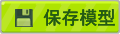
<style>
.page{position:relative;width:120px;height:34px;background:#aee301}
.page>*{position:absolute;margin:0}
.t1{font:18px "SimHei";color:#235b13}
</style>
<div class="page">
<p class="t1" style="left:43px;top:9px;width:72px;height:17px">保存模型</p>
<p class="t1" style="left:43px;top:9px;width:72px;height:17px">保存模型</p>
<p class="t1" style="left:43px;top:9px;width:72px;height:17px">保存模型</p>
</div>
